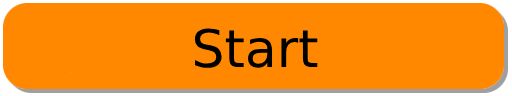
<style>
.page{position:relative;width:512px;height:96px;background:#ff8800}
.page>*{position:absolute;margin:0}
.t1{font:52px "DejaVuSans";color:#000000}
</style>
<div class="page">
<p class="t1" style="left:194px;top:28px;width:124px;height:40px">Start</p>
</div>
